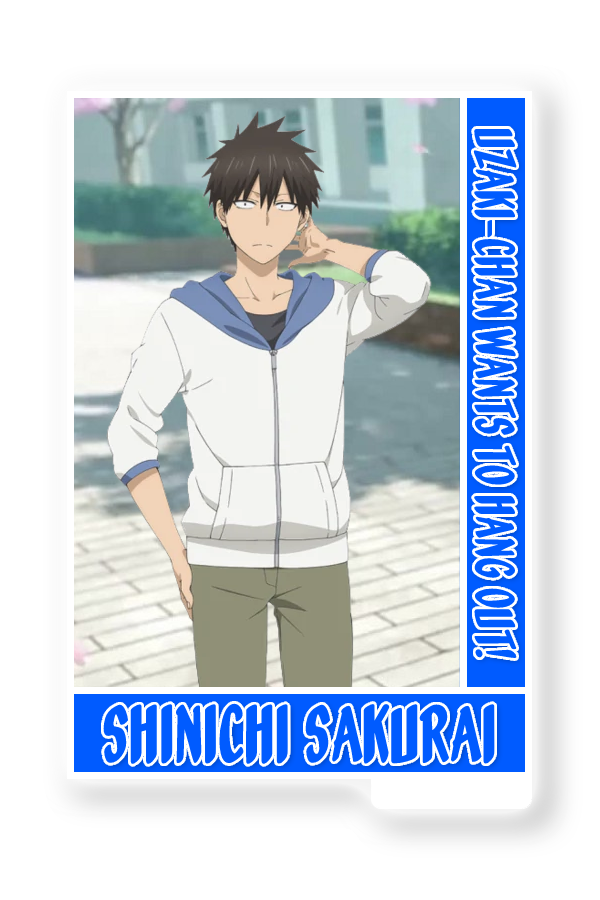
<style>
.page{position:relative;width:600px;height:900px;background:#ffffff}
.page>*{position:absolute;margin:0}
.t1{font:48.8px "OrangeFizz";color:#005bff}
.t2{font:70.8px "OrangeFizz";color:#005bff}
</style>
<div class="page">
<p class="t1" style="left:473px;top:128px;width:44px;height:530px;rotate:90deg">Uzaki-chan wants to hang out!</p>
<p class="t2" style="left:103px;top:703px;width:392px;height:61px">SHINICHI SAKURAI</p>
</div>
